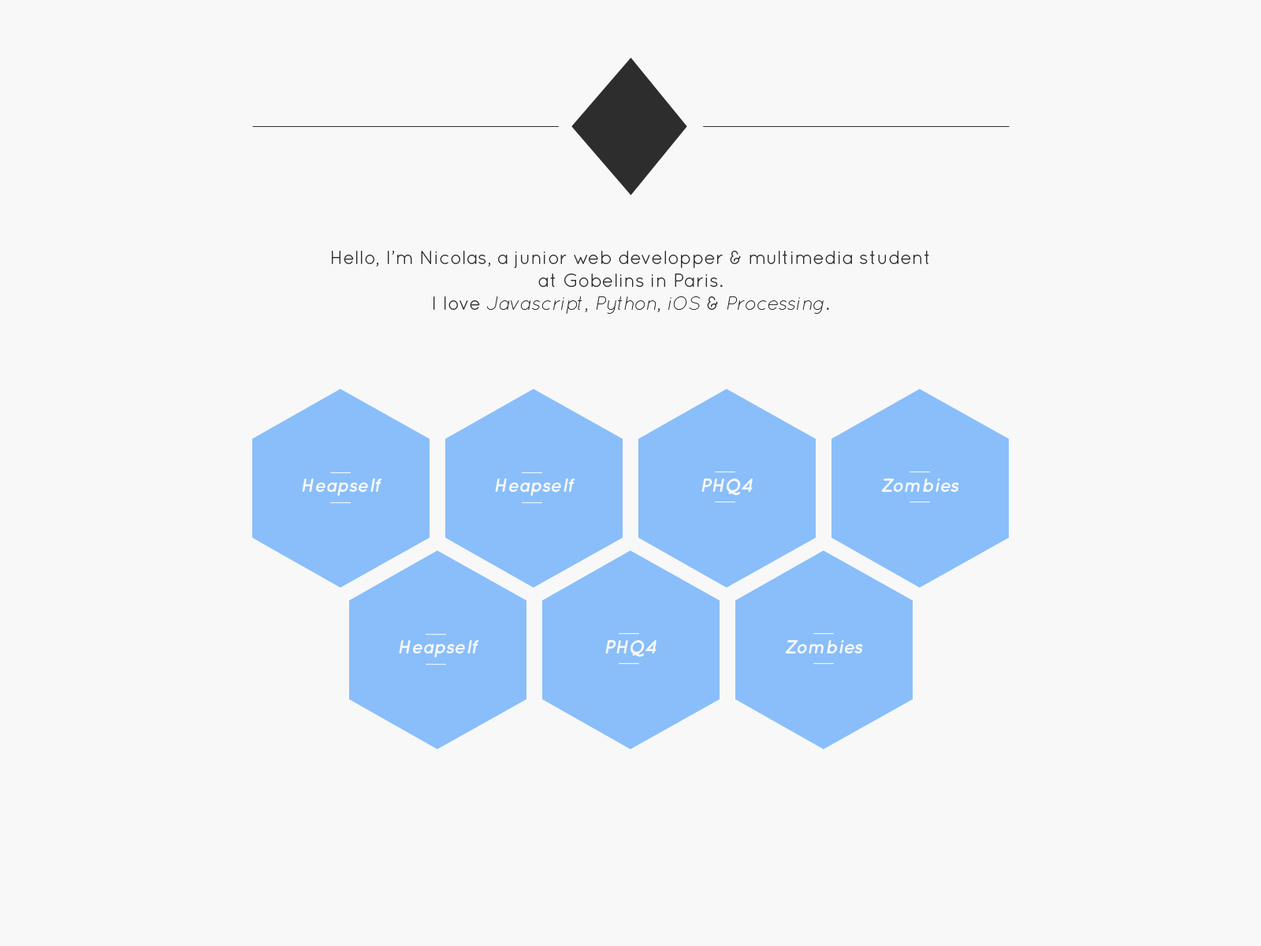
<style>
.page{position:relative;width:1261px;height:946px;background:#f8f8f8}
.page>*{position:absolute;margin:0}
.t1{font:18.9px "QuicksandBook-Regular";color:#2d2d2d}
.t2{font:18.9px "QuicksandLightOblique-Regular";color:#2d2d2d}
.t3{font:18.9px "QuicksandBoldOblique-Regular";color:#f8f8f8}
</style>
<div class="page">
<p class="t1" style="left:332px;top:251px;width:597px;height:63px;text-align:center">Hello, I’m Nicolas, a junior web developper &amp; multimedia student <br>at Gobelins in Paris.<br>I love <span class="t2">Javascript</span>, <span class="t2">Python</span>, <span class="t2">iOS </span>&amp; <span class="t2">Processing</span>.</p>
<p class="t3" style="left:302px;top:478px;width:80px;height:18px">Heapself</p>
<p class="t3" style="left:495px;top:478px;width:80px;height:18px">Heapself</p>
<p class="t3" style="left:701px;top:478px;width:52px;height:17px">PHQ4</p>
<p class="t3" style="left:881px;top:478px;width:78px;height:14px">Zombies</p>
<p class="t3" style="left:399px;top:640px;width:80px;height:17px">Heapself</p>
<p class="t3" style="left:605px;top:640px;width:51px;height:16px">PHQ4</p>
<p class="t3" style="left:785px;top:640px;width:78px;height:13px">Zombies</p>
</div>
